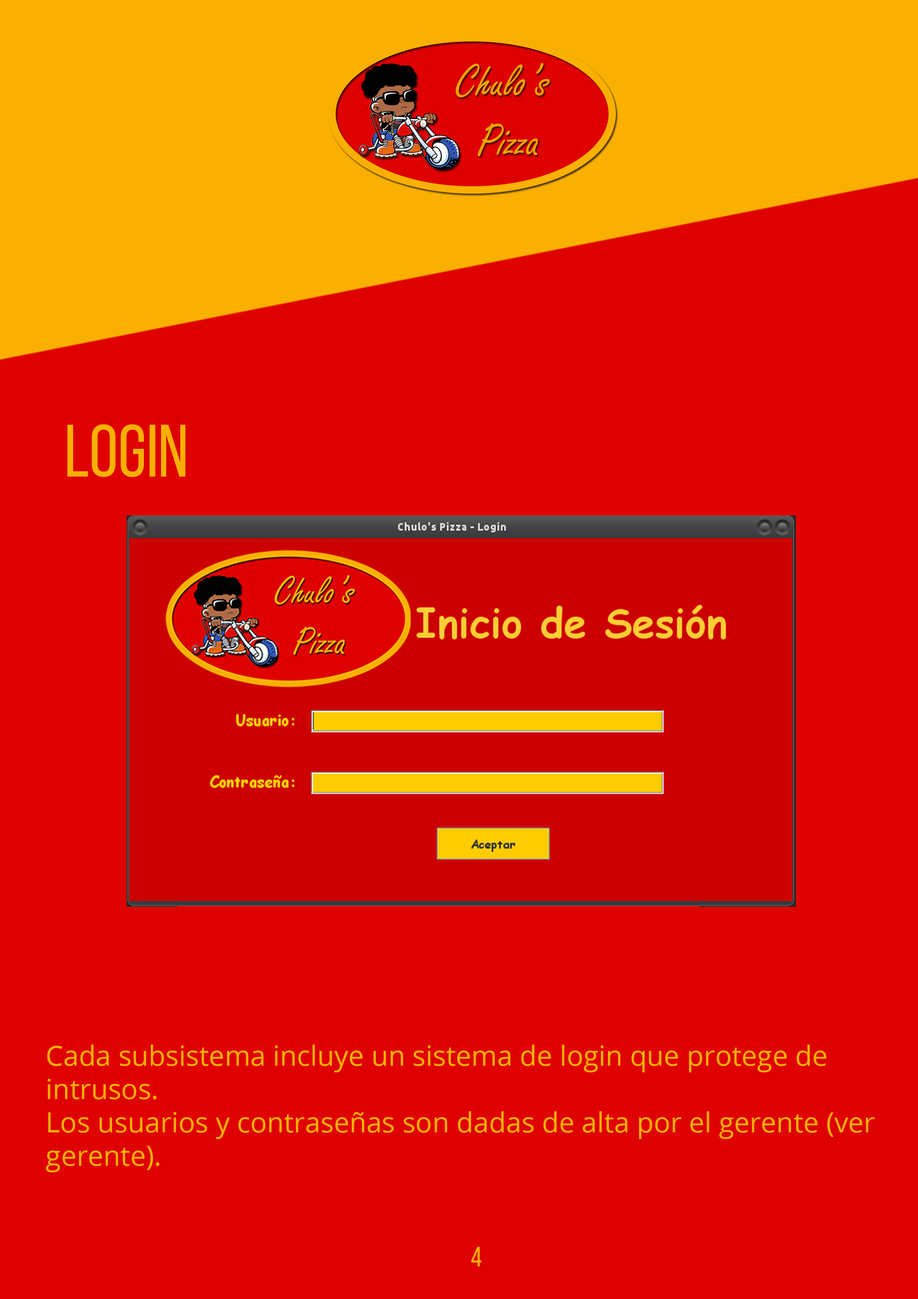
<style>
.page{position:relative;width:918px;height:1299px;background:#df0000}
.page>*{position:absolute;margin:0}
.t1{font:74px "BebasNeueRegular";color:#fab000}
.t2{font:27.8px "OpenSans";color:#fab000}
.t3{font:27.8px "BebasNeueRegular";color:#fab000}
</style>
<div class="page">
<p class="t1" style="left:67px;top:424px;width:118px;height:53px">LOGIN</p>
<p class="t2" style="left:46px;top:1044px;width:829px;height:128px">Cada subsistema incluye un sistema de login que protege de intrusos. <br>Los usuarios y contraseñas son dadas de alta por el gerente (ver gerente).</p>
<p class="t3" style="left:471px;top:1247px;width:11px;height:19px">4</p>
</div>
